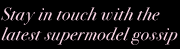
<style>
.page{position:relative;width:180px;height:49px;background:#000000}
.page>*{position:absolute;margin:0}
.t1{font:18px/20px "BodoniSvtyTwoOSITCTTBookIt";letter-spacing:0.034em;color:#fbd7e7}
</style>
<div class="page">
<p class="t1" style="left:1px;top:7px;width:177px;height:38px">Stay in touch with the <br>latest supermodel gossip</p>
</div>
